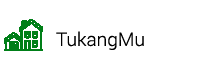
<style>
.page{position:relative;width:210px;height:70px;background:#ffffff}
.page>*{position:absolute;margin:0}
.t1{font:18.6px "Roboto-Light";color:#000000}
</style>
<div class="page">
<p class="t1" style="left:56px;top:31px;width:88px;height:19px">TukangMu</p>
</div>
